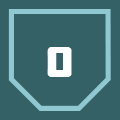
<style>
.page{position:relative;width:120px;height:120px;background:#336166}
.page>*{position:absolute;margin:0}
.t1{font:48px "TransformersMovie";color:#ffffff}
</style>
<div class="page">
<p class="t1" style="left:47px;top:47px;width:25px;height:30px">0</p>
</div>
